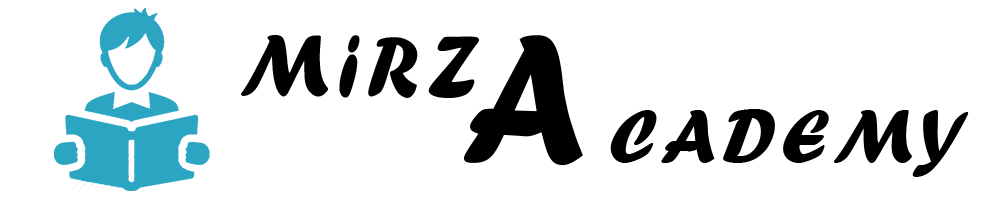
<style>
.page{position:relative;width:990px;height:200px;background:#ffffff}
.page>*{position:absolute;margin:0}
.t1{font:92.2px "ForteMT";letter-spacing:0.1em;color:#000000;scale:0.9 1}
.t2{font:191.3px "ForteMT";letter-spacing:0.1em;color:#000000;scale:0.87 1}
.t3{font:78.5px "ForteMT";letter-spacing:0.1em;color:#000000;scale:0.94 1}
</style>
<div class="page">
<p class="t1" style="left:241px;top:35px;width:238px;height:63px;rotate:1deg">MiRZ</p>
<p class="t2" style="left:463px;top:35px;width:120px;height:131px;rotate:2deg">A</p>
<p class="t3" style="left:610px;top:109px;width:359px;height:68px">CADEMY</p>
</div>
